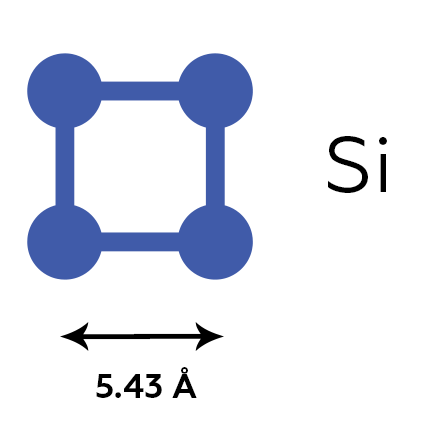
<style>
.page{position:relative;width:427px;height:437px;background:#ffffff}
.page>*{position:absolute;margin:0}
.t1{font:78px "Geometria";color:#000000}
.t2{font:33px "Geometria-Bold";color:#000000}
</style>
<div class="page">
<p class="t1" style="left:328px;top:136px;width:59px;height:57px">Si</p>
<p class="t2" style="left:96px;top:367px;width:101px;height:31px">5.43 Å</p>
</div>
